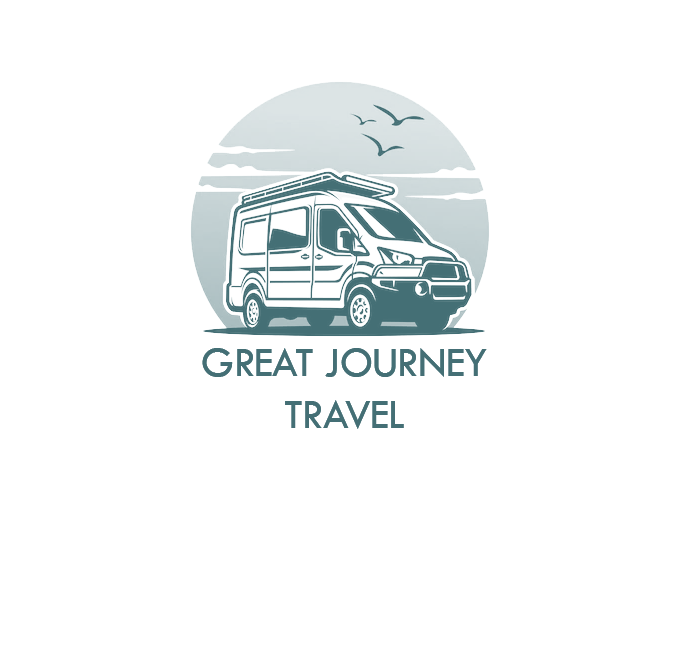
<style>
.page{position:relative;width:681px;height:658px;background:#ffffff}
.page>*{position:absolute;margin:0}
.t1{font:43px "TwCenMT-Regular";letter-spacing:-0.02em;color:#446f75}
</style>
<div class="page">
<p class="t1" style="left:202px;top:348px;width:285px;height:81px;text-align:center">GREAT JOURNEY<br>TRAVEL</p>
</div>
